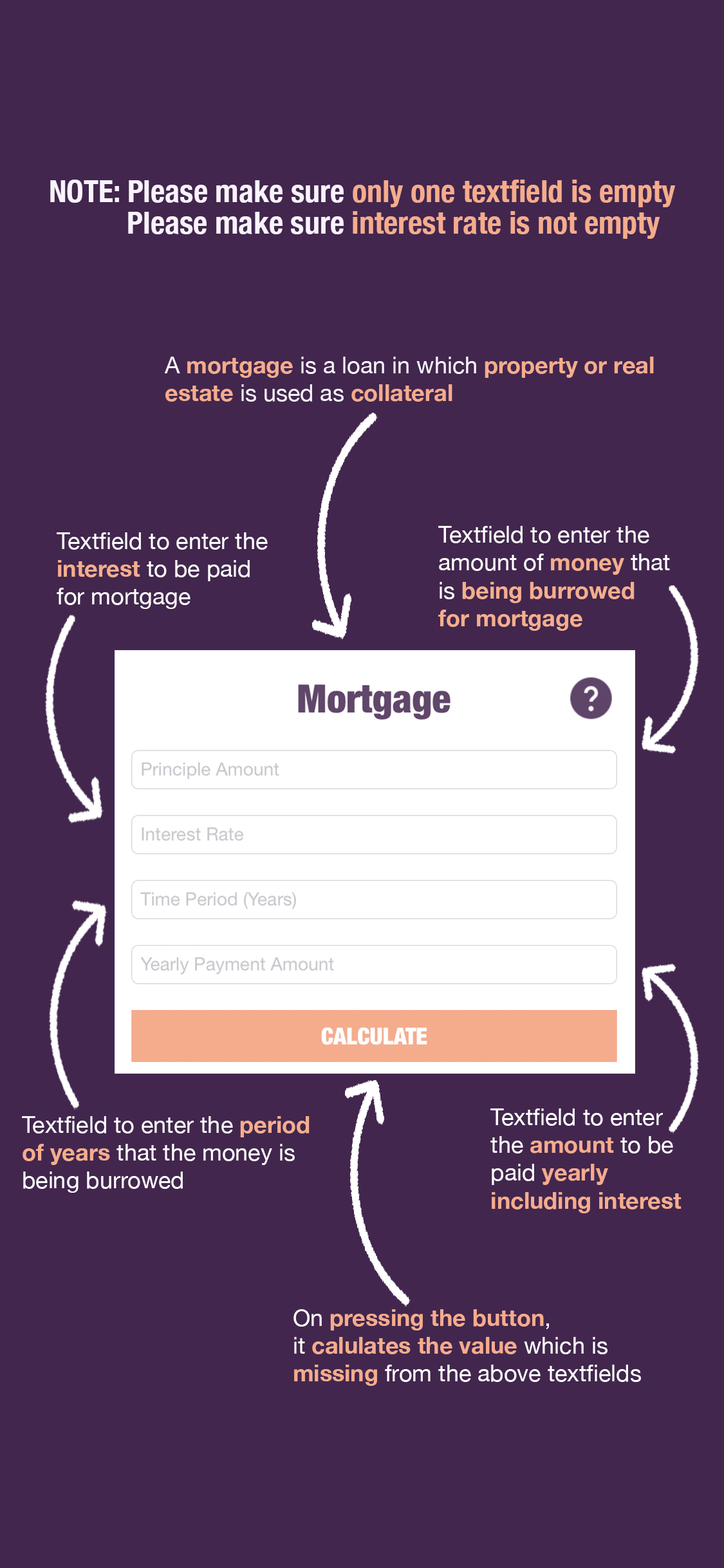
<style>
.page{position:relative;width:724px;height:1568px;background:#42264e}
.page>*{position:absolute;margin:0}
.t1{font:30.9px "HelveticaNeue-CondensedBold";color:#f5ac8d}
.t2{font:30.9px "HelveticaNeue-CondensedBold";color:#f9f3fb}
.t3{font:23.2px "HelveticaNeue-Bold";color:#f5ac8d}
.t4{font:23.2px "HelveticaNeue";color:#f9f3fb}
.t5{font:23.2px "HelveticaNeue";color:#ffffff}
.t6{font:23.2px "HelveticaNeue-Bold";color:#f5ae8d}
</style>
<div class="page">
<p class="t1" style="left:50px;top:180px;width:626px;height:27px"><span class="t2">NOTE: Please make sure</span> only one textfield is empty</p>
<p class="t1" style="left:128px;top:211px;width:532px;height:28px"><span class="t2">Please make sure</span> interest rate is not empty</p>
<p class="t3" style="left:164px;top:357px;width:490px;height:45px"><span class="t4">A </span>mortgage<span class="t4"> is a loan in which </span>property or real <br>estate<span class="t4"> is used as </span>collateral</p>
<p class="t5" style="left:57px;top:532px;width:211px;height:77px">Textfield to enter the<br><span class="t6">interest </span>to be paid <br>for mortgage</p>
<p class="t5" style="left:438px;top:526px;width:232px;height:105px">Textfield to enter the <br>amount of <span class="t6">money</span> that <br>is <span class="t6">being burrowed<br>for mortgage</span></p>
<p class="t3" style="left:490px;top:1108px;width:192px;height:105px"><span class="t5">Textfield to enter <br>the </span>amount<span class="t5"> to be<br>paid </span>yearly <br>including interest</p>
<p class="t5" style="left:22px;top:1116px;width:288px;height:77px">Textfield to enter the <span class="t6">period <br>of years</span> that the money is <br>being burrowed</p>
<p class="t5" style="left:294px;top:1309px;width:347px;height:77px">On <span class="t3">pressing the button</span>, <br>it <span class="t3">calulates the value</span> which is <br><span class="t3">missing</span> from the above textfields</p>
</div>
